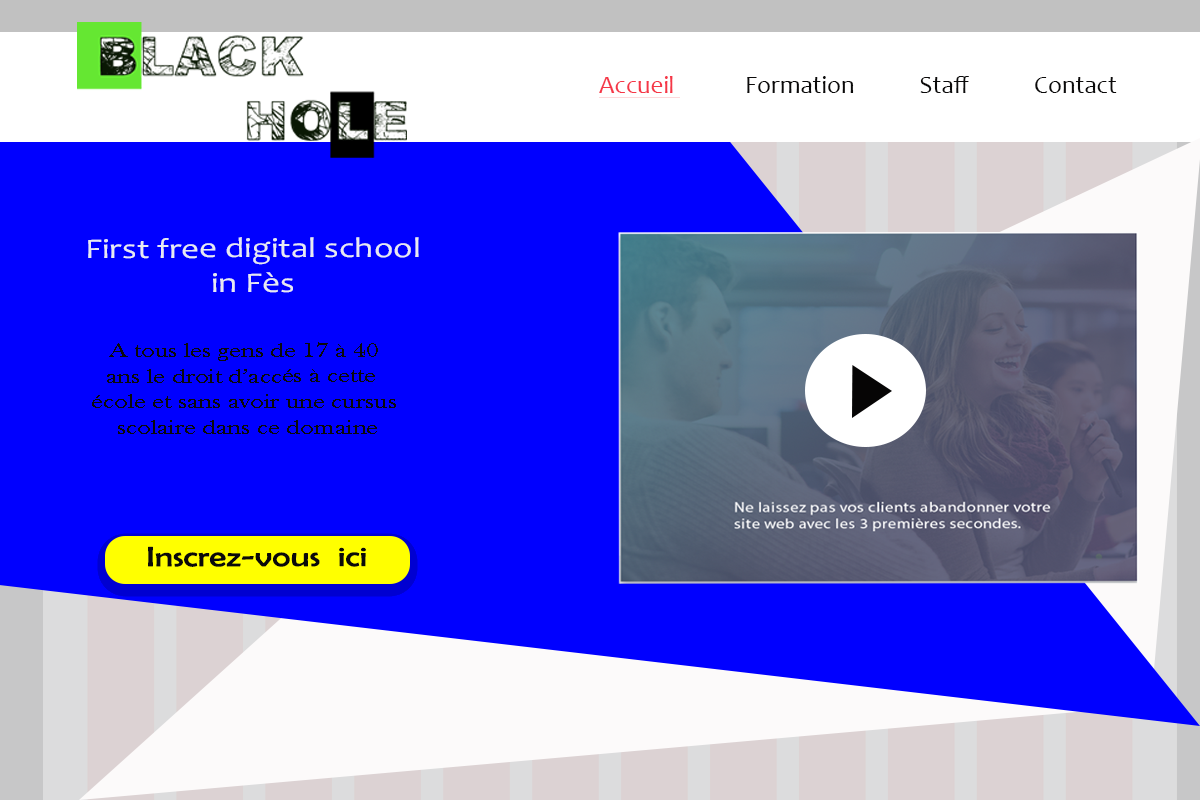
<style>
.page{position:relative;width:1200px;height:800px;background:#0000ff}
.page>*{position:absolute;margin:0}
.t1{font:25px "Candara";color:#0b0a0a}
.t2{font:25px "Candara";color:#f53748;text-decoration:underline}
.t3{font:28.5px "Candara";color:#e8e9f1;scale:1.23 1}
.t4{font:21.4px "BaskOldFace";color:#0b0a0a;scale:1.23 1}
.t5{font:28.5px "BerlinSansFB-Reg";color:#0b0a0a;scale:1.23 1}
</style>
<div class="page">
<p class="t1" style="left:599px;top:76px;width:518px;height:22px"><span class="t2">Accueil </span>            Formation            Staff            Contact</p>
<p class="t3" style="left:88px;top:237px;width:331px;height:56px;text-align:center">First free digital school<br>in Fès</p>
<p class="t4" style="left:92px;top:342px;width:304px;height:92px;text-align:center">A tous les gens de 17 à 40<br>ans le droit d’accés à cette <br>école et sans avoir une cursus<br> scolaire dans ce domaine</p>
<p class="t5" style="left:148px;top:546px;width:218px;height:21px">Inscrez-vous  ici</p>
</div>
